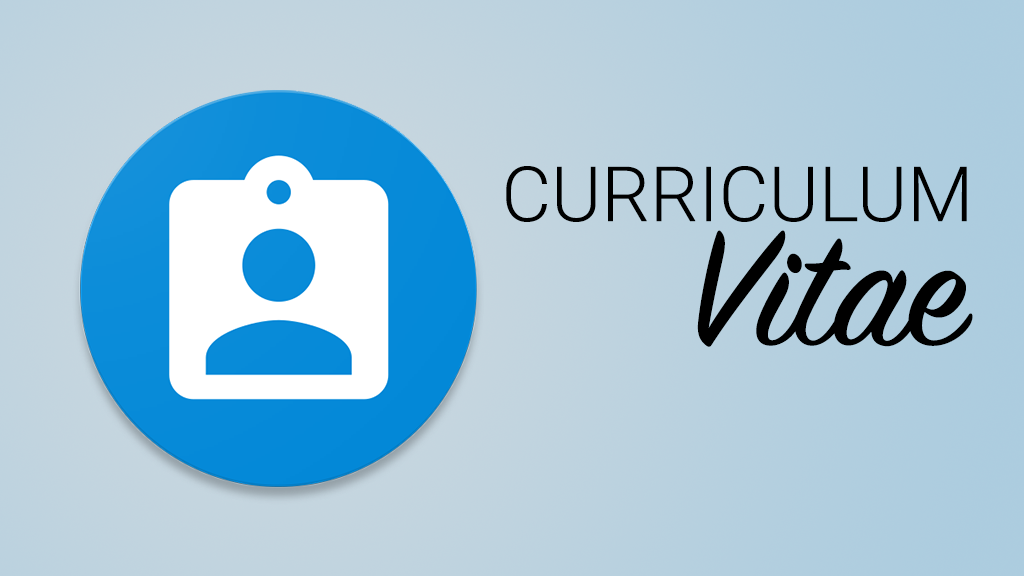
<style>
.page{position:relative;width:1024px;height:576px}
.page>*{position:absolute;margin:0}
.t1{font:76.5px "Roboto-Light";color:#000000}
.t2{font:182.1px "SignPainter-HouseScript";color:#000000}
</style>
<div class="page">
<p class="t1" style="left:506px;top:166px;width:461px;height:56px">CURRICULUM</p>
<p class="t2" style="left:697px;top:230px;width:276px;height:117px">Vitae</p>
</div>
